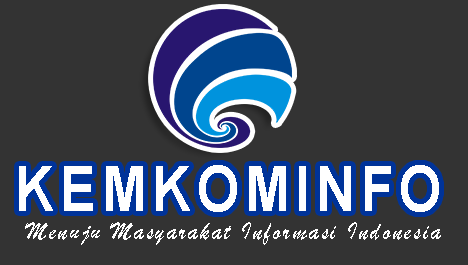
<style>
.page{position:relative;width:468px;height:265px;background:#333333}
.page>*{position:absolute;margin:0}
.t1{font:61.7px "Arial-BoldMT";letter-spacing:0.105em;color:#ffffff;scale:0.88 1}
.t2{font:26.2px "BrushScriptMT";letter-spacing:0.105em;color:#ffffff;scale:0.91 1}
</style>
<div class="page">
<p class="t1" style="left:19px;top:165px;width:420px;height:47px">KEMKOMINFO</p>
<p class="t2" style="left:25px;top:222px;width:416px;height:23px">Menuju Masyarakat Informasi Indonesia</p>
</div>
